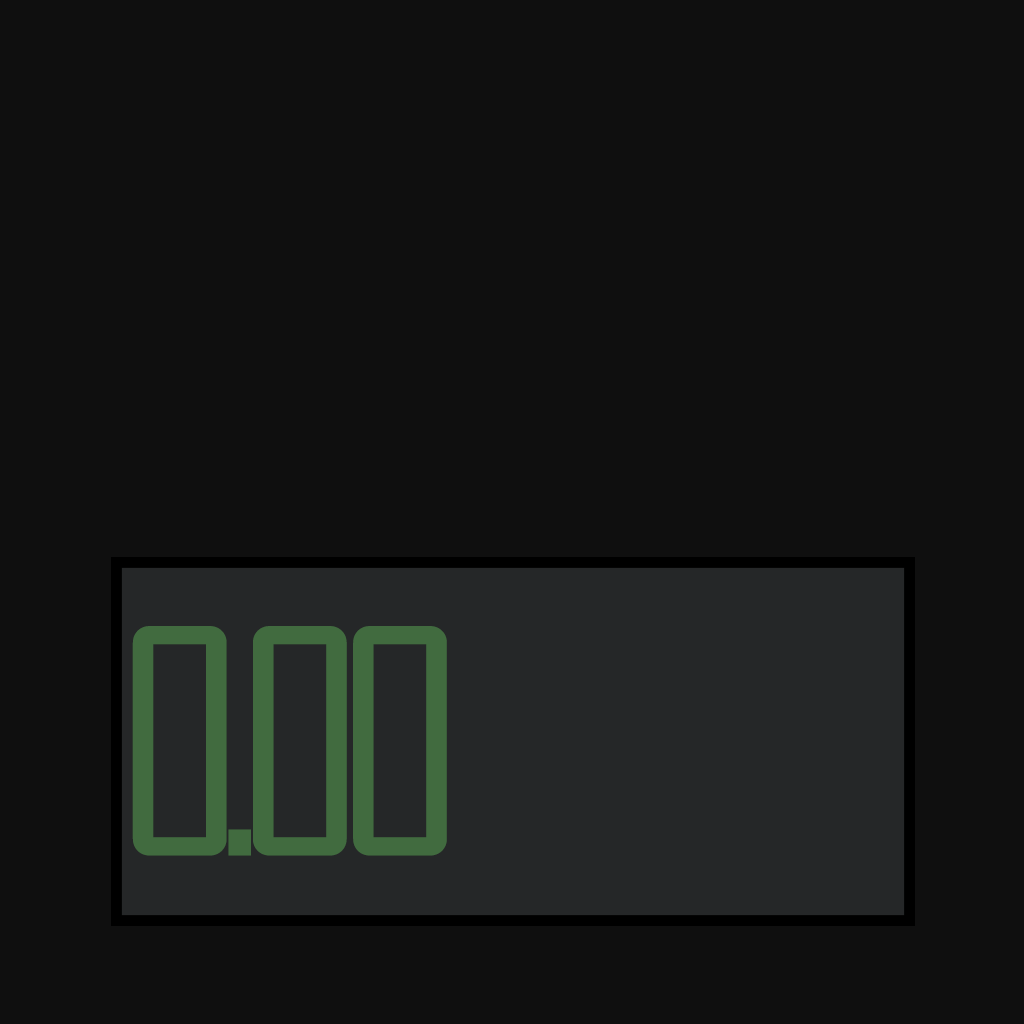
<style>
.page{position:relative;width:1024px;height:1024px;background:#0f0f0f}
.page>*{position:absolute;margin:0}
.t1{font:300px "AgencyFB-Reg";letter-spacing:-0.1em;color:#416b3f}
</style>
<div class="page">
<p class="t1" style="left:132px;top:626px;width:315px;height:230px">0.00</p>
</div>
